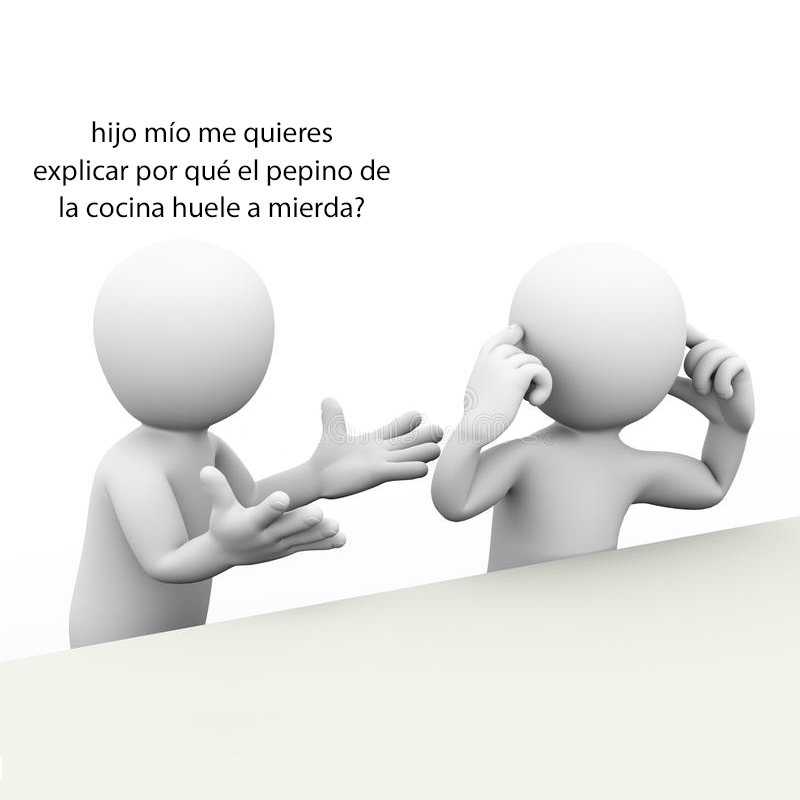
<style>
.page{position:relative;width:800px;height:800px;background:#ffffff}
.page>*{position:absolute;margin:0}
.t1{font:29.2px "MyriadPro-Regular";color:#000000}
</style>
<div class="page">
<p class="t1" style="left:34px;top:121px;width:356px;height:97px;text-align:center">hijo mío me quieres<br>explicar por qué el pepino de<br>la cocina huele a mierda?</p>
</div>
